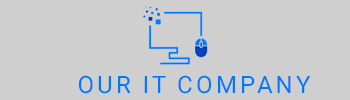
<style>
.page{position:relative;width:350px;height:100px;background:#cecfce}
.page>*{position:absolute;margin:0}
.t1{font:24px "Roboto-Regular";letter-spacing:0.1em;color:#0378fa;text-transform:uppercase}
</style>
<div class="page">
<p class="t1" style="left:79px;top:75px;width:232px;height:19px">our IT company</p>
</div>
